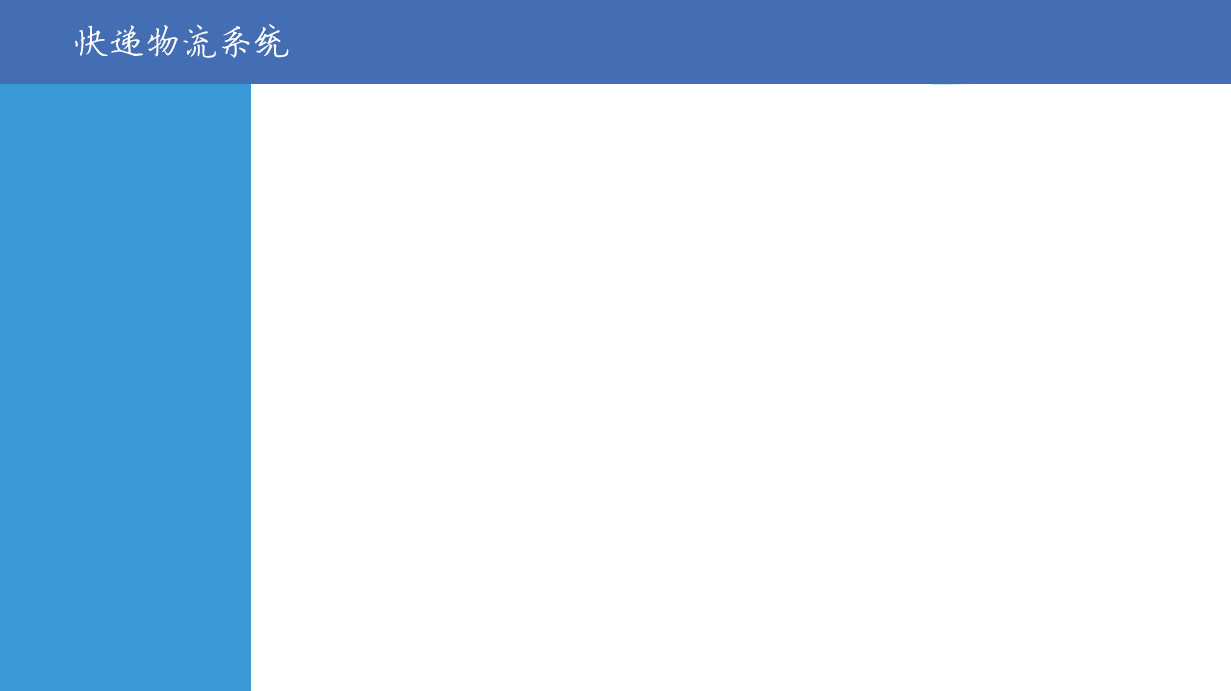
<style>
.page{position:relative;width:1231px;height:691px;background:#ffffff}
.page>*{position:absolute;margin:0}
.t1{font:36px "FZYBKSJW--GB1-0";color:#fefefe}
</style>
<div class="page">
<p class="t1" style="left:75px;top:24px;width:214px;height:34px">快递物流系统</p>
</div>
